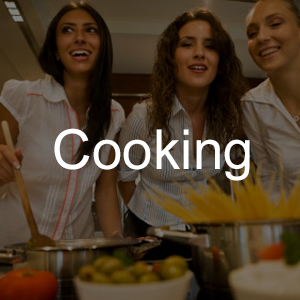
<style>
.page{position:relative;width:300px;height:300px}
.page>*{position:absolute;margin:0}
.t1{font:55px "ArialMT";color:#ffffff}
</style>
<div class="page">
<p class="t1" style="left:54px;top:128px;width:196px;height:53px">Cooking</p>
</div>
